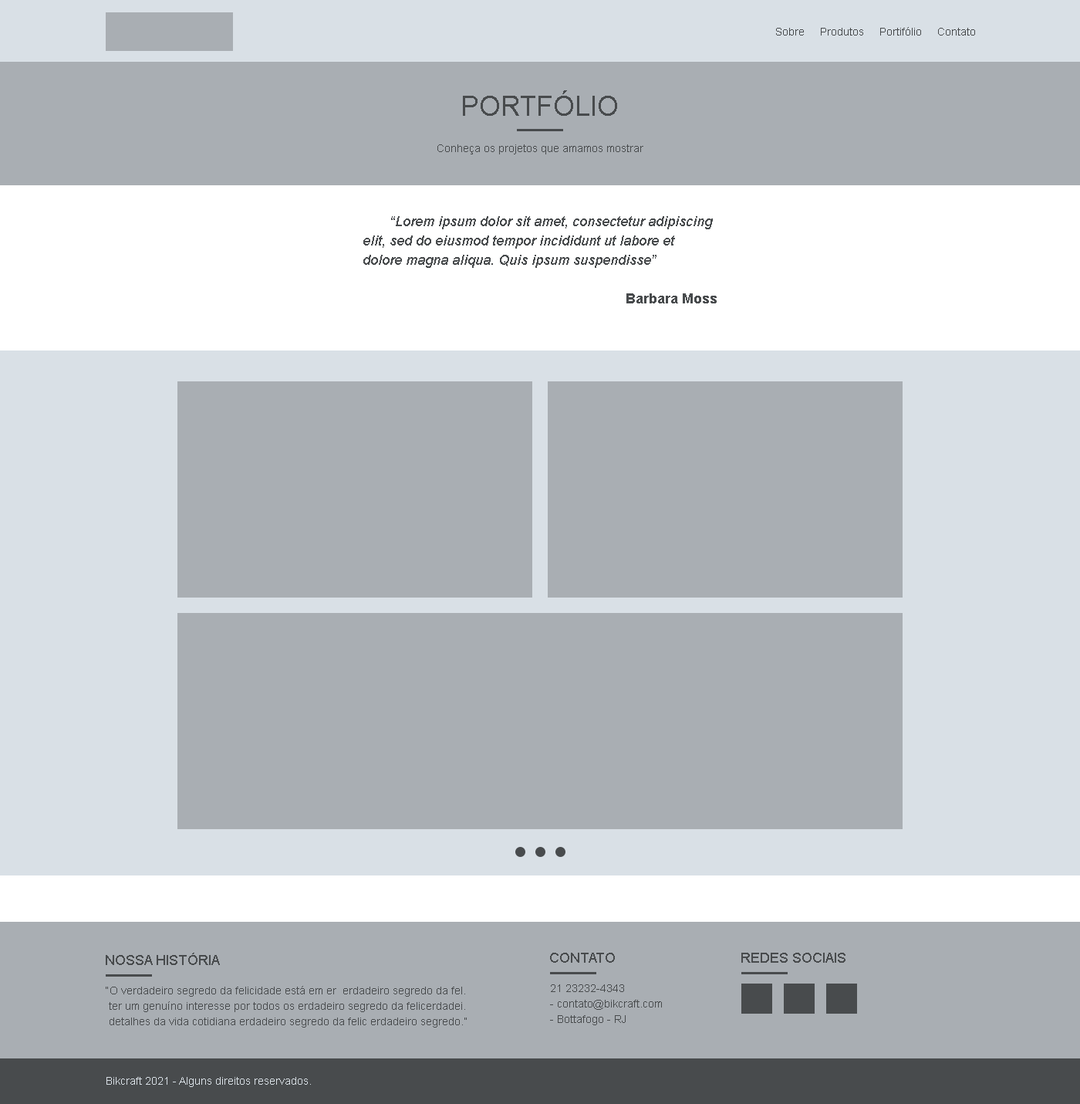
<style>
.page{position:relative;width:1080px;height:1104px;background:#a9aeb3}
.page>*{position:absolute;margin:0}
.t1{font:10.8px "ArialMT";color:#484b4d}
.t2{font:27.8px "ArialMT";color:#484b4d;text-transform:uppercase}
.t3{font:13.9px/19.3px "Arial-ItalicMT";color:#484b4d}
.t4{font:13.9px/19.3px "Arial-BoldMT";color:#484b4d}
.t5{font:13.9px "ArialMT";color:#484b4d}
.t6{font:10.8px/15.4px "ArialMT";color:#484b4d}
.t7{font:10.8px "ArialMT";color:#d9e0e6}
</style>
<div class="page">
<p class="t1" style="left:776px;top:27px;width:200px;height:9px">Sobre     Produtos     Portifólio     Contato</p>
<p class="t2" style="left:463px;top:90px;width:154px;height:26px">PORTFÓLIO</p>
<p class="t1" style="left:438px;top:144px;width:206px;height:10px">Conheça os projetos que amamos mostrar</p>
<p class="t3" style="left:364px;top:216px;width:353px;height:87px">“Lorem ipsum dolor sit amet, consectetur adipiscing elit, sed do eiusmod tempor incididunt ut labore et dolore magna aliqua. Quis ipsum suspendisse”<br><br><span class="t4">Barbara Moss</span></p>
<p class="t5" style="left:106px;top:952px;width:114px;height:13px">NOSSA HISTÓRIA</p>
<p class="t5" style="left:550px;top:952px;width:65px;height:10px">CONTATO</p>
<p class="t5" style="left:742px;top:952px;width:104px;height:10px">REDES SOCIAIS</p>
<p class="t6" style="left:106px;top:986px;width:361px;height:41px">“O verdadeiro segredo da felicidade está em er  erdadeiro segredo da fel.  <br> ter um genuíno interesse por todos os erdadeiro segredo da felicerdadei.<br> detalhes da vida cotidiana erdadeiro segredo da felic erdadeiro segredo.”</p>
<p class="t6" style="left:550px;top:984px;width:112px;height:41px">21 23232-4343<br>- contato@bikcraft.com<br>- Bottafogo - RJ</p>
<p class="t7" style="left:107px;top:1077px;width:204px;height:10px">Bikcraft 2021 - Alguns direitos reservados.</p>
</div>
